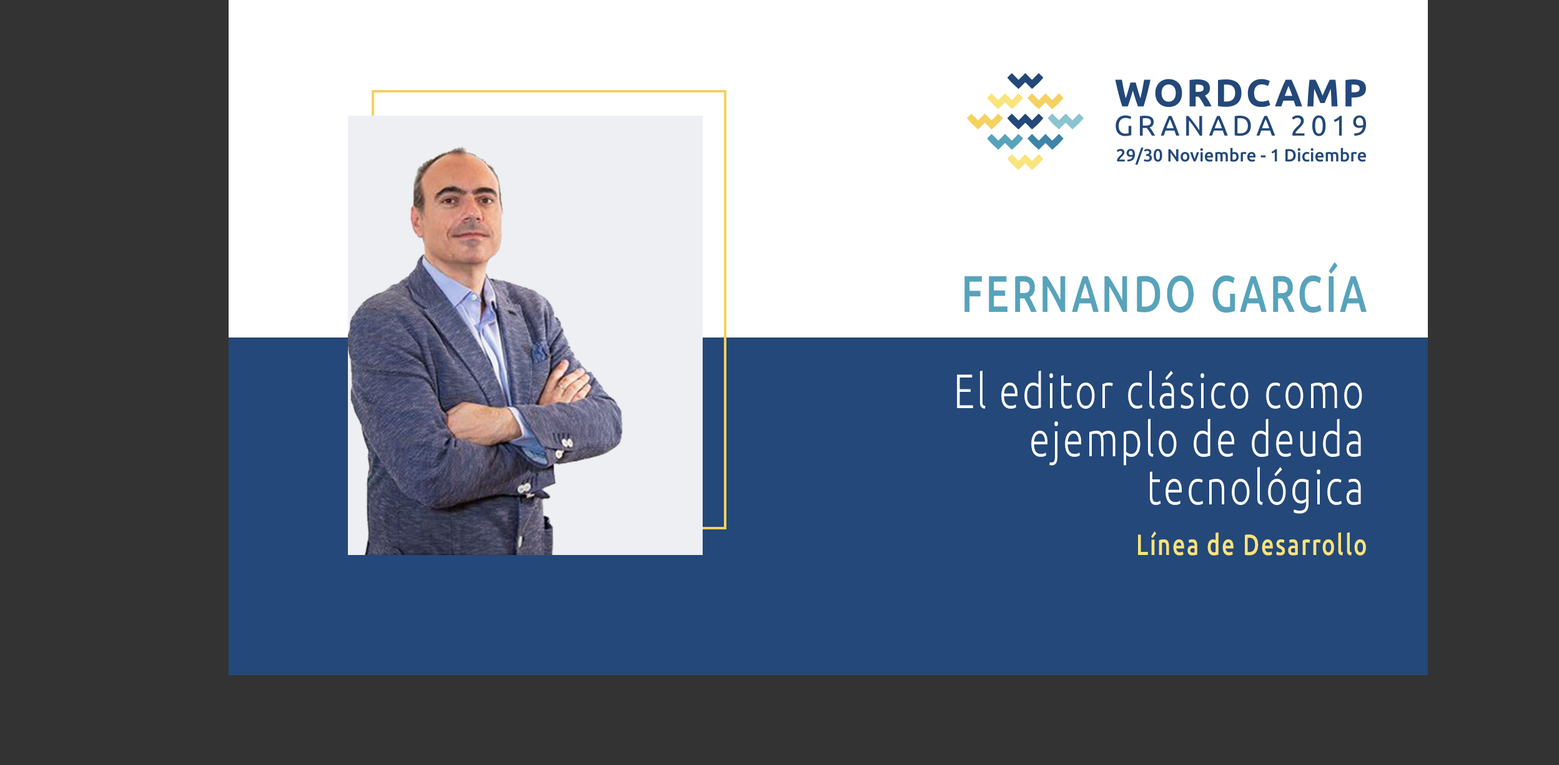
<style>
.page{position:relative;width:1559px;height:765px;background:#333333}
.page>*{position:absolute;margin:0}
.t1{font:51.4px "Ubuntu-Medium";letter-spacing:0.068em;color:#57a3bb;scale:0.77 1}
.t2{font:48.2px/48.2px "Ubuntu-Light";letter-spacing:0.068em;color:#ffffff;scale:0.77 1}
.t3{font:29.2px "Ubuntu-Medium";letter-spacing:0.068em;color:#f9e37b;scale:0.77 1}
</style>
<div class="page">
<p class="t1" style="left:965px;top:262px;width:402px;height:51px">FERNANDO GARCÍA</p>
<p class="t2" style="left:957px;top:370px;width:406px;height:144px;text-align:right">El editor clásico como ejemplo de deuda tecnológica</p>
<p class="t3" style="left:1138px;top:531px;width:228px;height:24px">Línea de Desarrollo</p>
</div>
